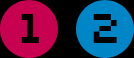
<style>
.page{position:relative;width:134px;height:58px;background:#000000}
.page>*{position:absolute;margin:0}
.t1{font:48px "Silkscreen";letter-spacing:-0.025em;color:#000000}
</style>
<div class="page">
<p class="t1" style="left:21px;top:14px;width:18px;height:29px">1</p>
<p class="t1" style="left:93px;top:14px;width:24px;height:29px">2</p>
</div>
